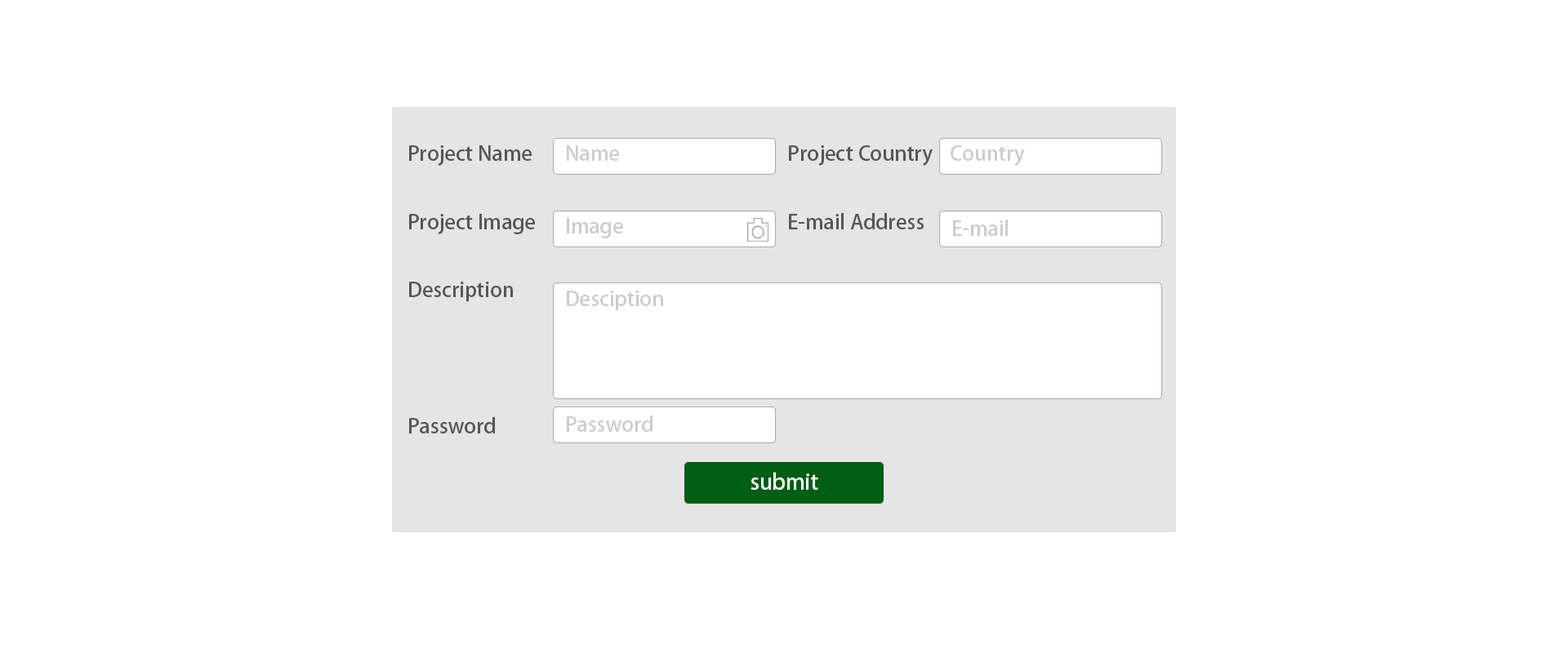
<style>
.page{position:relative;width:1568px;height:653px;background:#ffffff}
.page>*{position:absolute;margin:0}
.t1{font:20.4px/68.1px "AdobeHeitiStd-Regular";color:#565656}
.t2{font:20.4px "AdobeHeitiStd-Regular";color:#cccccc}
.t3{font:21.4px "AdobeHeitiStd-Regular";color:#ffffff}
</style>
<div class="page">
<p class="t1" style="left:409px;top:145px;width:524px;height:289px">Project Name              Project Country<br>Project Image                                                       E-mail Address<br>Description<br><br>Password</p>
<p class="t2" style="left:567px;top:145px;width:52px;height:16px">Name</p>
<p class="t2" style="left:951px;top:145px;width:74px;height:21px">Country</p>
<p class="t2" style="left:567px;top:218px;width:56px;height:20px">Image</p>
<p class="t2" style="left:953px;top:220px;width:55px;height:16px">E-mail</p>
<p class="t2" style="left:567px;top:291px;width:96px;height:20px">Desciption</p>
<p class="t2" style="left:567px;top:416px;width:86px;height:16px">Password</p>
<p class="t3" style="left:751px;top:472px;width:67px;height:18px">submit</p>
</div>
